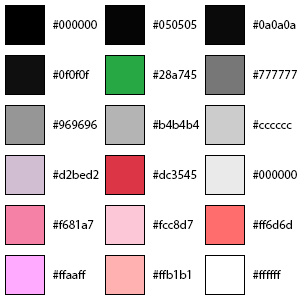
<style>
.page{position:relative;width:300px;height:300px;background:#ffffff}
.page>*{position:absolute;margin:0}
.t1{font:12.5px "MyriadPro-Regular";color:#000000}
</style>
<div class="page">
<p class="t1" style="left:53px;top:20px;width:44px;height:9px">#000000</p>
<p class="t1" style="left:153px;top:20px;width:44px;height:9px">#050505</p>
<p class="t1" style="left:253px;top:20px;width:43px;height:9px">#0a0a0a</p>
<p class="t1" style="left:53px;top:70px;width:37px;height:9px">#0f0f0f</p>
<p class="t1" style="left:153px;top:70px;width:44px;height:9px">#28a745</p>
<p class="t1" style="left:253px;top:70px;width:44px;height:9px">#777777</p>
<p class="t1" style="left:53px;top:120px;width:44px;height:9px">#969696</p>
<p class="t1" style="left:153px;top:120px;width:47px;height:9px">#b4b4b4</p>
<p class="t1" style="left:253px;top:120px;width:39px;height:9px">#cccccc</p>
<p class="t1" style="left:53px;top:170px;width:46px;height:9px">#d2bed2</p>
<p class="t1" style="left:153px;top:170px;width:44px;height:9px">#dc3545</p>
<p class="t1" style="left:253px;top:170px;width:44px;height:9px">#000000</p>
<p class="t1" style="left:53px;top:220px;width:41px;height:9px">#f681a7</p>
<p class="t1" style="left:153px;top:220px;width:40px;height:9px">#fcc8d7</p>
<p class="t1" style="left:253px;top:220px;width:39px;height:9px">#ff6d6d</p>
<p class="t1" style="left:53px;top:270px;width:33px;height:9px">#ffaaff</p>
<p class="t1" style="left:153px;top:270px;width:38px;height:9px">#ffb1b1</p>
<p class="t1" style="left:253px;top:270px;width:28px;height:9px">#ffffff</p>
</div>
